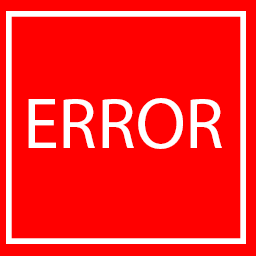
<style>
.page{position:relative;width:256px;height:256px;background:#ff0000}
.page>*{position:absolute;margin:0}
.t1{font:72px "MyriadPro-Regular";color:#ffffff}
</style>
<div class="page">
<p class="t1" style="left:28px;top:98px;width:194px;height:51px">ERROR</p>
</div>
